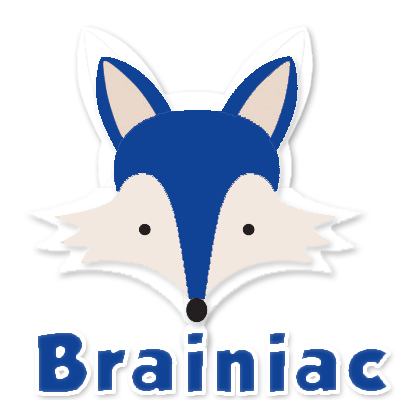
<style>
.page{position:relative;width:400px;height:400px;background:#ffffff}
.page>*{position:absolute;margin:0}
.t1{font:74.5px "GROBOLD";color:#104296;font-weight:bold}
</style>
<div class="page">
<p class="t1" style="left:36px;top:331px;width:353px;height:63px">Brainiac</p>
</div>
